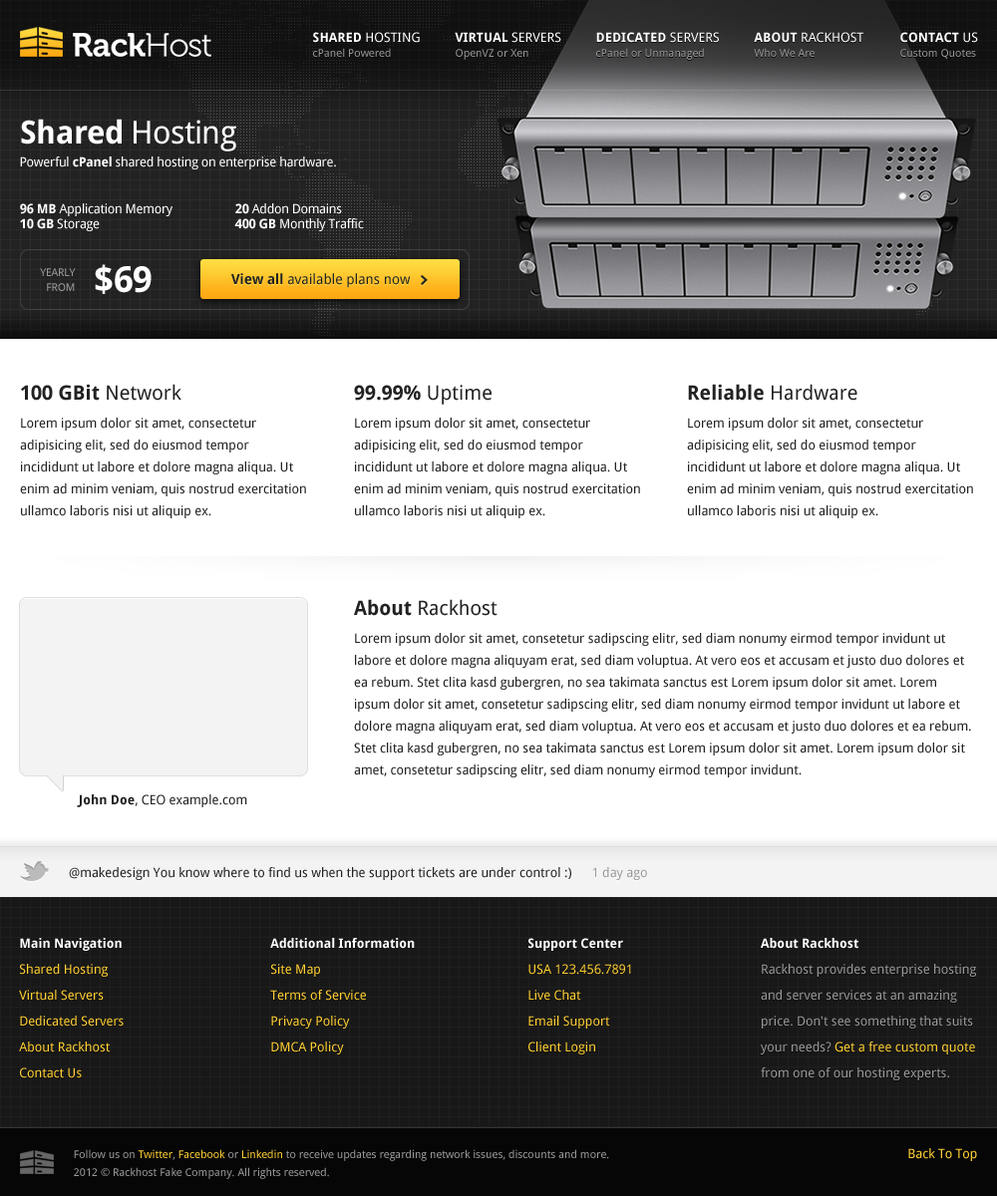
<style>
.page{position:relative;width:997px;height:1196px;background:#ffffff}
.page>*{position:absolute;margin:0}
.t1{font:11px/15px "DroidSans";color:#999999}
.t2{font:13px/15px "DroidSans-Bold";color:#ffffff}
.t3{font:13px/15px "DroidSans";color:#ffffff}
.t4{font:31.9px "DroidSans";letter-spacing:-0.02em;color:#ffffff}
.t5{font:31.9px "DroidSans-Bold";letter-spacing:-0.02em;color:#ffffff}
.t6{font:13px "DroidSans";letter-spacing:-0.02em;color:#ffffff}
.t7{font:13px "DroidSans-Bold";letter-spacing:-0.02em;color:#ffffff}
.t8{font:13px/15px "DroidSans";letter-spacing:-0.02em;color:#ffffff}
.t9{font:13px/15px "DroidSans-Bold";letter-spacing:-0.02em;color:#ffffff}
.t10{font:11px/15px "DroidSans";letter-spacing:-0.02em;color:#999999}
.t11{font:35.9px "DroidSans-Bold";letter-spacing:-0.02em;color:#ffffff}
.t12{font:14px "DroidSans";color:#222222}
.t13{font:14px "DroidSans-Bold";color:#222222}
.t14{font:13px/21.9px "DroidSans";color:#222222}
.t15{font:19.9px/14px "DroidSans-Bold";color:#222222}
.t16{font:19.9px/14px "DroidSans";color:#222222}
.t17{font:13px/14px "DroidSans";color:#222222}
.t18{font:13px "DroidSans";color:#222222}
.t19{font:13px "DroidSans-Bold";color:#222222}
.t20{font:13px "DroidSans";color:#999999}
.t21{font:13px/25.9px "DroidSans";color:#fecf35}
.t22{font:13px/25.9px "DroidSans-Bold";color:#ffffff}
.t23{font:13px/25.9px "DroidSans";color:#999999}
.t24{font:11px/17.9px "DroidSans";color:#999999}
.t25{font:11px/17.9px "DroidSans";color:#fecf35}
.t26{font:13px "DroidSans";color:#fecf35}
</style>
<div class="page">
<p class="t1" style="left:313px;top:32px;width:107px;height:25px"><span class="t2">SHARED </span><span class="t3">HOSTING<br></span>cPanel Powered</p>
<p class="t1" style="left:455px;top:32px;width:106px;height:28px"><span class="t2">VIRTUAL </span><span class="t3">SERVERS<br></span>OpenVZ or Xen</p>
<p class="t1" style="left:596px;top:32px;width:123px;height:28px"><span class="t2">DEDICATED </span><span class="t3">SERVERS<br></span>cPanel or Unmanaged</p>
<p class="t1" style="left:754px;top:32px;width:109px;height:25px"><span class="t2">ABOUT </span><span class="t3">RACKHOST<br></span>Who We Are</p>
<p class="t1" style="left:900px;top:32px;width:78px;height:28px"><span class="t2">CONTACT </span><span class="t3">US<br></span>Custom Quotes</p>
<p class="t4" style="left:21px;top:119px;width:215px;height:33px"><span class="t5">Shared</span> Hosting</p>
<p class="t6" style="left:20px;top:157px;width:316px;height:12px">Powerful <span class="t7">cPanel</span> shared hosting on enterprise hardware.</p>
<p class="t8" style="left:20px;top:203px;width:344px;height:28px"><span class="t9">96 MB </span>Application Memory  <span class="t9"> 20 </span>Addon Domains<br><span class="t9">10 GB </span>Storage  <span class="t9">   400 GB </span>Monthly Traffic</p>
<p class="t10" style="left:40px;top:268px;width:36px;height:23px;text-align:right">YEARLY<br>FROM</p>
<p class="t11" style="left:95px;top:264px;width:57px;height:30px">$69</p>
<p class="t12" style="left:231px;top:273px;width:180px;height:15px"><span class="t13">View all</span> available plans now</p>
<p class="t14" style="left:20px;top:384px;width:286px;height:134px"><span class="t15">100 GBit</span><span class="t16"> Network<br><br></span><span class="t17">Lorem ipsum dolor sit amet, consectetur </span>adipisicing elit, sed do eiusmod tempor incididunt ut labore et dolore magna aliqua. Ut enim ad minim veniam, quis nostrud exercitation ullamco laboris nisi ut aliquip ex.</p>
<p class="t14" style="left:354px;top:385px;width:286px;height:133px"><span class="t15">99.99%</span><span class="t16"> Uptime<br><br></span><span class="t17">Lorem ipsum dolor sit amet, consectetur </span>adipisicing elit, sed do eiusmod tempor incididunt ut labore et dolore magna aliqua. Ut enim ad minim veniam, quis nostrud exercitation ullamco laboris nisi ut aliquip ex.</p>
<p class="t14" style="left:687px;top:384px;width:286px;height:134px"><span class="t15">Reliable</span><span class="t16"> Hardware<br><br></span><span class="t17">Lorem ipsum dolor sit amet, consectetur </span>adipisicing elit, sed do eiusmod tempor incididunt ut labore et dolore magna aliqua. Ut enim ad minim veniam, quis nostrud exercitation ullamco laboris nisi ut aliquip ex.</p>
<p class="t14" style="left:354px;top:599px;width:617px;height:179px"><span class="t15">About</span><span class="t16"> Rackhost<br><br></span><span class="t17">Lorem ipsum dolor sit amet, consetetur sadipscing elitr, sed diam nonumy eirmod tempor invidunt ut </span>labore et dolore magna aliquyam erat, sed diam voluptua. At vero eos et accusam et justo duo dolores et ea rebum. Stet clita kasd gubergren, no sea takimata sanctus est Lorem ipsum dolor sit amet. Lorem ipsum dolor sit amet, consetetur sadipscing elitr, sed diam nonumy eirmod tempor invidunt ut labore et dolore magna aliquyam erat, sed diam voluptua. At vero eos et accusam et justo duo dolores et ea rebum. Stet clita kasd gubergren, no sea takimata sanctus est Lorem ipsum dolor sit amet. Lorem ipsum dolor sit amet, consetetur sadipscing elitr, sed diam nonumy eirmod tempor invidunt.</p>
<p class="t18" style="left:77px;top:794px;width:170px;height:13px"><span class="t19">John Doe</span>, CEO example.com</p>
<p class="t18" style="left:69px;top:867px;width:578px;height:13px">@makedesign You know where to find us when the support tickets are under control :)      <span class="t20">1 day ago</span></p>
<p class="t21" style="left:19px;top:938px;width:105px;height:141px"><span class="t22">Main Navigation<br></span>Shared Hosting<br>Virtual Servers<br>Dedicated Servers<br>About Rackhost<br>Contact Us</p>
<p class="t21" style="left:270px;top:938px;width:145px;height:117px"><span class="t22">Additional Information<br></span>Site Map<br>Terms of Service<br>Privacy Policy<br>DMCA Policy</p>
<p class="t21" style="left:528px;top:938px;width:103px;height:117px"><span class="t22">Support Center<br></span>USA 123.456.7891<br>Live Chat<br>Email Support<br>Client Login</p>
<p class="t23" style="left:761px;top:938px;width:215px;height:143px"><span class="t22">About Rackhost<br></span>Rackhost provides enterprise hosting and server services at an amazing price. Don't see something that suits your needs? <span class="t21">Get a free custom quote </span>from one of our hosting experts.</p>
<p class="t24" style="left:74px;top:1149px;width:535px;height:30px">Follow us on <span class="t25">Twitter</span>, <span class="t25">Facebook</span> or <span class="t25">Linkedin</span> to receive updates regarding network issues, discounts and more.<br>2012 © Rackhost Fake Company. All rights reserved.</p>
<p class="t26" style="left:908px;top:1148px;width:69px;height:13px">Back To Top</p>
</div>
